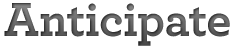
<style>
.page{position:relative;width:235px;height:50px;background:#ffffff}
.page>*{position:absolute;margin:0}
.t1{font:50px "ArcherPro-Bold"}
</style>
<div class="page">
<p class="t1" style="left:4px;top:3px;width:226px;height:43px">Anticipate</p>
</div>
